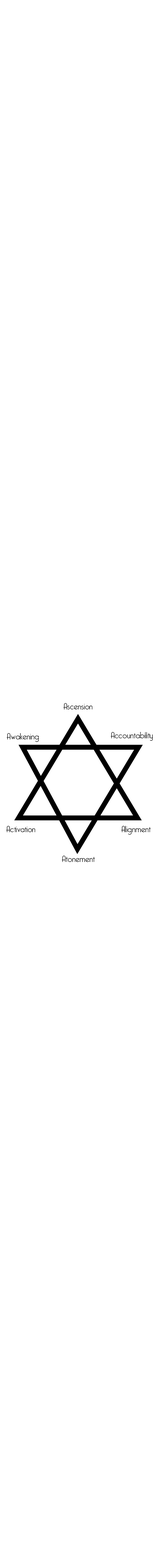
<style>
.page{position:relative;width:157px;height:1568px;background:#ffffff}
.page>*{position:absolute;margin:0}
.t1{font:9.2px "CaponeLight";color:#000000}
</style>
<div class="page">
<p class="t1" style="left:63px;top:703px;width:29px;height:6px">Ascension</p>
<p class="t1" style="left:6px;top:733px;width:33px;height:9px">Awakening</p>
<p class="t1" style="left:110px;top:732px;width:43px;height:9px">Accountability</p>
<p class="t1" style="left:6px;top:826px;width:29px;height:6px">Activation</p>
<p class="t1" style="left:121px;top:826px;width:30px;height:9px">Alignment</p>
<p class="t1" style="left:62px;top:856px;width:33px;height:6px">Atonement</p>
</div>
